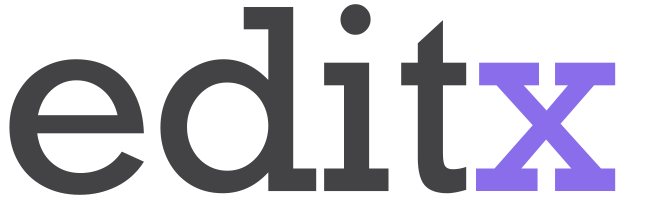
<style>
.page{position:relative;width:645px;height:203px;background:#ffffff}
.page>*{position:absolute;margin:0}
.t1{font:250px "Rockwell-Regular";letter-spacing:-0.005em;color:#434245}
.t2{font:250px "Rockwell-Regular";letter-spacing:-0.005em;color:#896dea}
</style>
<div class="page">
<p class="t1" style="left:9px;top:4px;width:607px;height:191px">edit<span class="t2">x</span></p>
</div>
